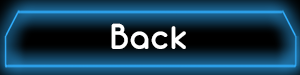
<style>
.page{position:relative;width:300px;height:75px}
.page>*{position:absolute;margin:0}
.t1{font:36px "Neon80s";color:#ffffff}
</style>
<div class="page">
<p class="t1" style="left:111px;top:23px;width:75px;height:26px">Back</p>
</div>
